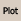
<style>
.page{position:relative;width:21px;height:21px;background:#d9cdc1}
.page>*{position:absolute;margin:0}
.t1{font:9px "Tahoma";color:#000000}
</style>
<div class="page">
<p class="t1" style="left:3px;top:7px;width:15px;height:8px">Plot</p>
</div>
